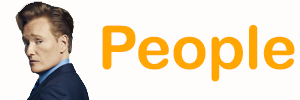
<style>
.page{position:relative;width:300px;height:100px;background:#fefdfb}
.page>*{position:absolute;margin:0}
.t1{font:60px "ArialRoundedMTBold";color:#ffa600}
</style>
<div class="page">
<p class="t1" style="left:102px;top:24px;width:193px;height:58px">People</p>
</div>
